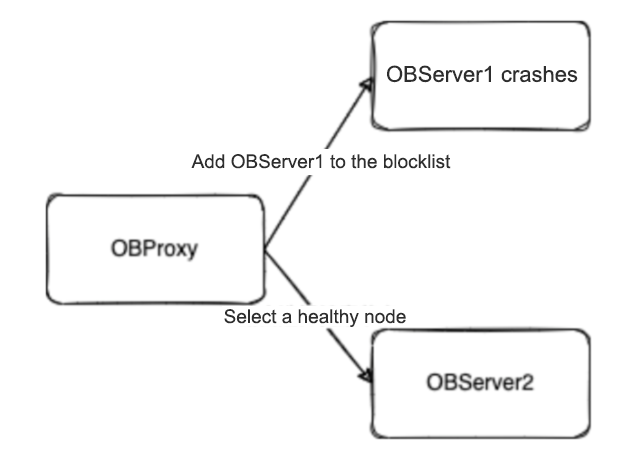
<style>
.page{position:relative;width:621px;height:465px;background:#ffffff}
.page>*{position:absolute;margin:0}
.t1{font:22px "ArialMT";color:#2e2e2e}
.t2{font:19px "ArialMT";color:#2e2e2e}
</style>
<div class="page">
<p class="t1" style="left:387px;top:65px;width:191px;height:18px">OBServer1 crashes</p>
<p class="t2" style="left:191px;top:154px;width:260px;height:15px">Add OBServer1 to the blocklist</p>
<p class="t2" style="left:224px;top:309px;width:182px;height:18px">Select a healthy node</p>
</div>
